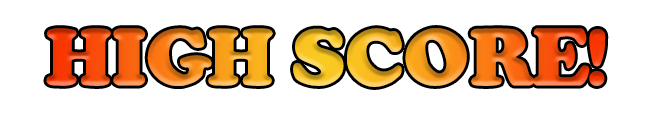
<style>
.page{position:relative;width:650px;height:115px;background:#ffffff}
.page>*{position:absolute;margin:0}
.t1{font:70.9px "Coolsville"}
</style>
<div class="page">
<p class="t1" style="left:46px;top:28px;width:560px;height:59px">HIGH SCORE!</p>
</div>
